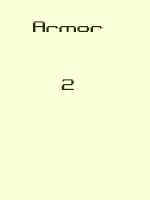
<style>
.page{position:relative;width:150px;height:200px;background:#fbffda}
.page>*{position:absolute;margin:0}
.t1{font:24px "BinaryXCHRBRK";color:#282c09}
</style>
<div class="page">
<p class="t1" style="left:33px;top:21px;width:70px;height:69px;text-align:center">Armor<br><br>2</p>
</div>
